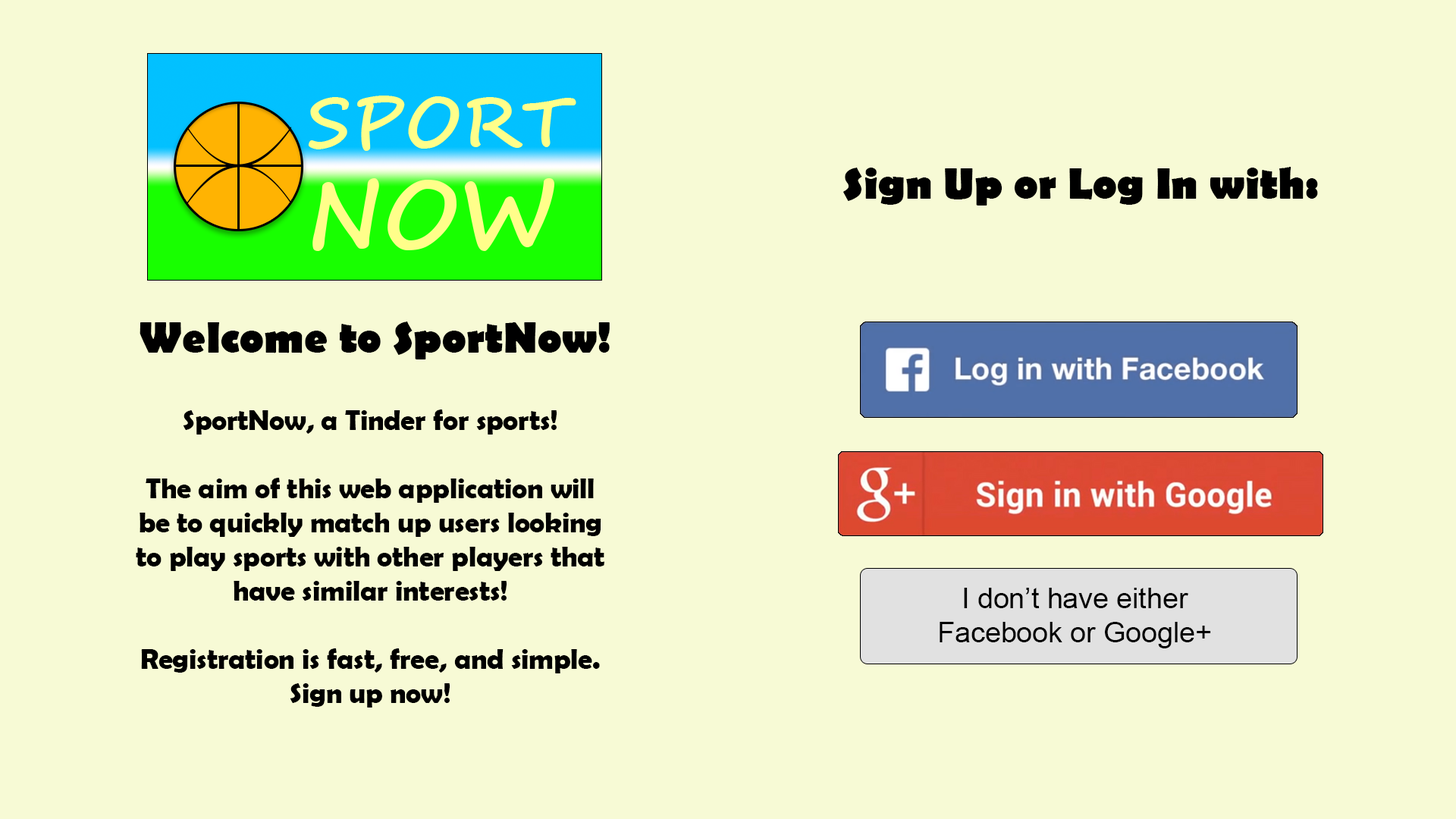
<style>
.page{position:relative;width:1456px;height:819px;background:#f7fad5}
.page>*{position:absolute;margin:0}
.t1{font:44.2px "BerlinSansFB-Bold";color:#000000}
.t2{font:28.4px "BerlinSansFBDemi-Bold";color:#000000}
</style>
<div class="page">
<p class="t1" style="left:843px;top:167px;width:475px;height:39px">Sign Up or Log In with:</p>
<p class="t1" style="left:140px;top:322px;width:470px;height:37px">Welcome to SportNow!</p>
<p class="t2" style="left:136px;top:409px;width:468px;height:299px;text-align:center">SportNow, a Tinder for sports!<br><br>The aim of this web application will be to quickly match up users looking to play sports with other players that have similar interests!<br><br>Registration is fast, free, and simple. Sign up now!</p>
</div>
